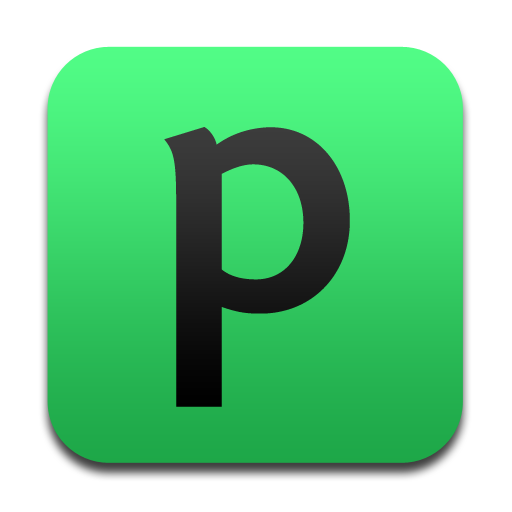
<style>
.page{position:relative;width:512px;height:512px;background:#ffffff}
.page>*{position:absolute;margin:0}
.t1{font:395px "TodaySHOP-Medium";letter-spacing:-0.025em;color:#252525}
</style>
<div class="page">
<p class="t1" style="left:164px;top:127px;width:186px;height:280px">p</p>
</div>
